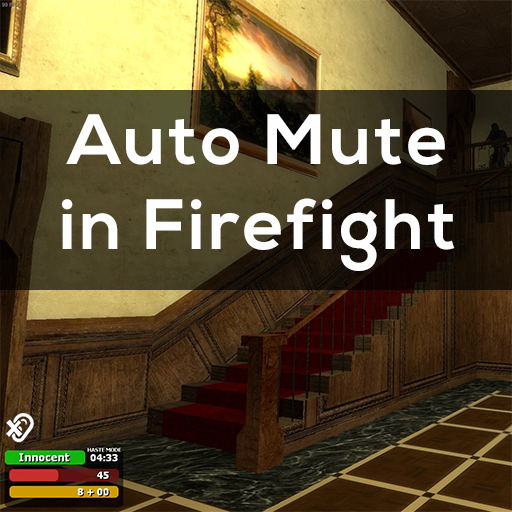
<style>
.page{position:relative;width:512px;height:512px}
.page>*{position:absolute;margin:0}
.t1{font:71.1px "NexaBold";letter-spacing:0.05em;color:#fefefe}
</style>
<div class="page">
<p class="t1" style="left:62px;top:114px;width:393px;height:157px;text-align:center">Auto Mute<br>in Firefight</p>
</div>
